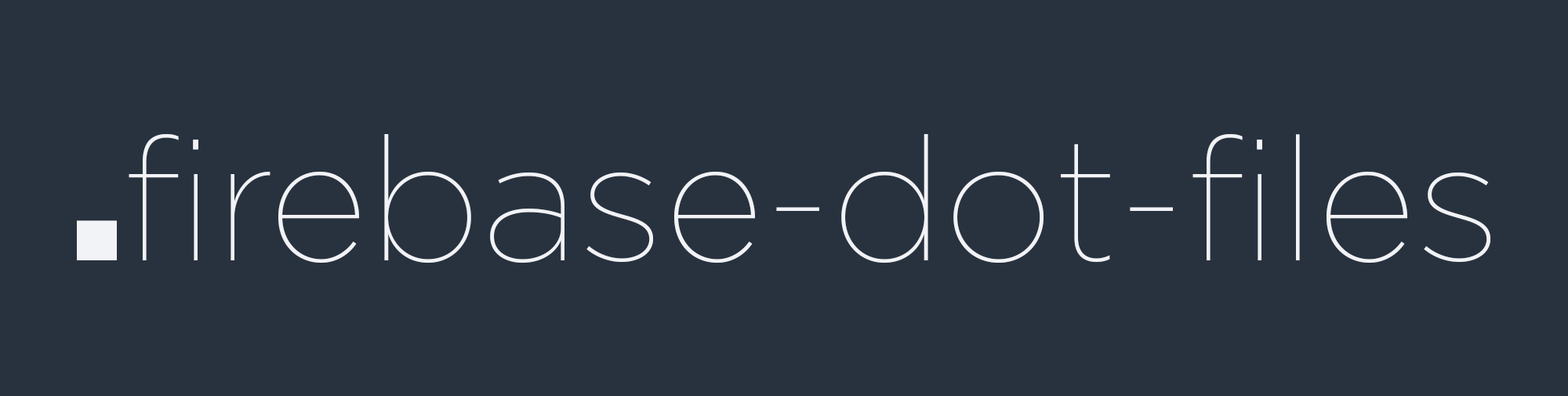
<style>
.page{position:relative;width:1568px;height:396px;background:#28323f}
.page>*{position:absolute;margin:0}
.t1{font:172.5px "Gotham-Thin";color:#f2f3f7}
.t2{font:172.5px "Gotham-Ultra";color:#f2f3f7}
</style>
<div class="page">
<p class="t1" style="left:77px;top:134px;width:1413px;height:129px"><span class="t2">.</span>firebase-dot-files</p>
</div>
